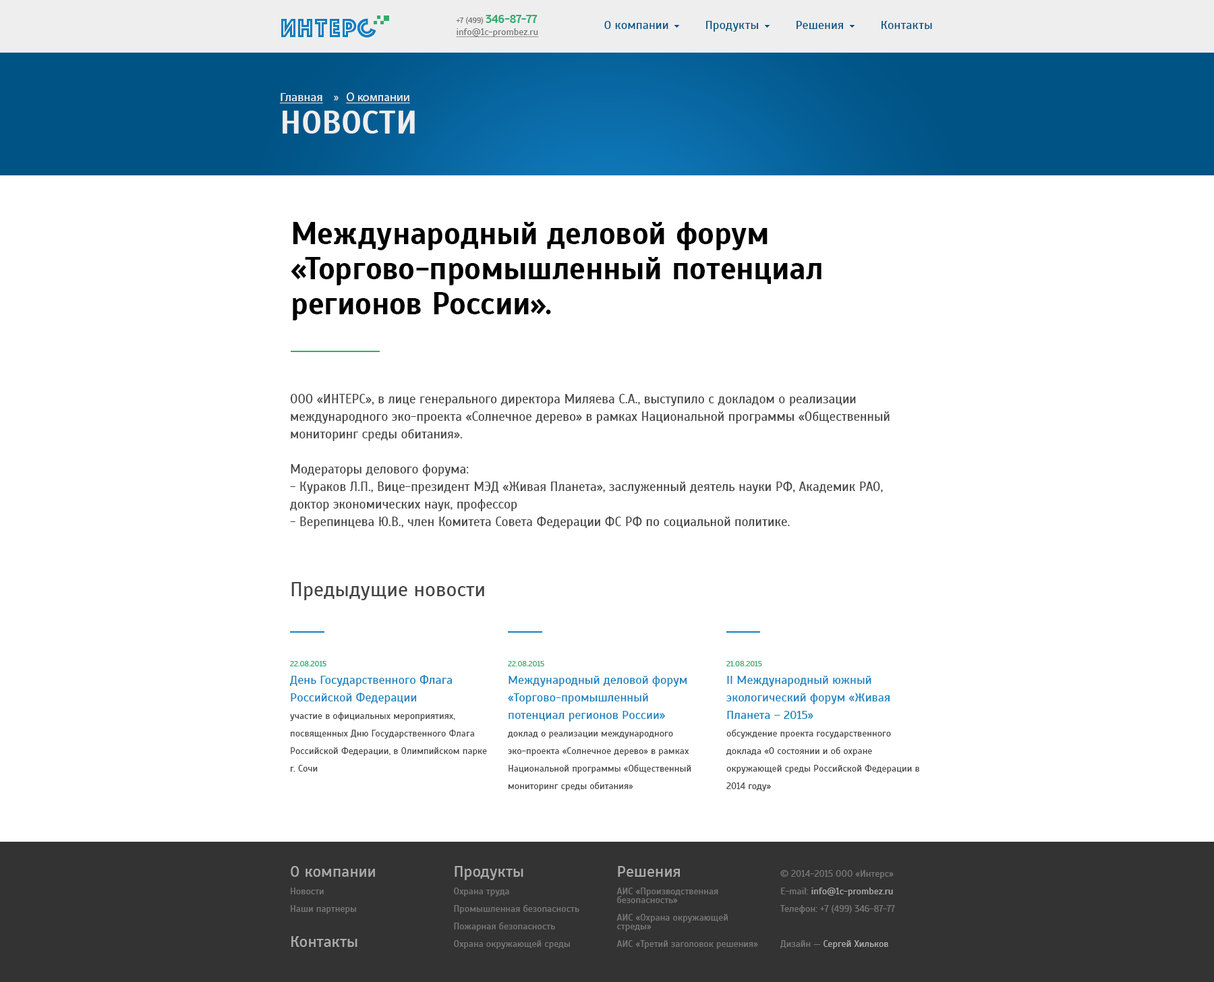
<style>
.page{position:relative;width:1214px;height:982px;background:#ffffff}
.page>*{position:absolute;margin:0}
.t1{font:9.4px/12.1px "Scada";color:#777777;text-decoration:underline}
.t2{font:8.1px/12.1px "Scada";color:#777777}
.t3{font:11.5px/12.1px "Scada-Bold";color:#35ab6c}
.t4{font:12.1px "Scada";color:#005385}
.t5{font:12.1px/32.4px "MyriadPro-Regular";color:#eeeeee;text-decoration:underline}
.t6{font:12.1px/32.4px "Scada";color:#eeeeee;text-decoration:underline}
.t7{font:12.1px/32.4px "MyriadPro-Regular";color:#eeeeee}
.t8{font:32.4px/32.4px "Scada-Bold";color:#eeeeee;text-transform:uppercase}
.t9{font:31px/35.1px "Scada-Bold";color:#000000}
.t10{font:12.8px/17.5px "Scada";color:#444444}
.t11{font:20.2px/17.5px "Scada";color:#444444}
.t12{font:9.4px/17.5px "Scada";color:#444444}
.t13{font:8.1px/17.5px "Scada";color:#17ac71}
.t14{font:12.1px/17.5px "Scada";color:#1581bf}
.t15{font:8.1px/17.5px "Scada";color:#35ab6c}
.t16{font:9.4px/17.5px "Scada";color:#777777}
.t17{font:16.2px/17.5px "Scada";color:#ababab}
.t18{font:9.4px/8.8px "Scada";color:#777777}
.t19{font:9.4px/17.5px "Scada";color:#ababab}
</style>
<div class="page">
<p class="t1" style="left:456px;top:15px;width:83px;height:22px"><span class="t2">+7 (499) </span><span class="t3">346-87-77<br></span>info@1c-prombez.ru</p>
<p class="t4" style="left:604px;top:21px;width:64px;height:8px">О компании</p>
<p class="t4" style="left:706px;top:21px;width:53px;height:11px">Продукты</p>
<p class="t4" style="left:797px;top:21px;width:46px;height:8px">Решения</p>
<p class="t4" style="left:882px;top:21px;width:50px;height:8px">Контакты</p>
<p class="t5" style="left:280px;top:92px;width:135px;height:42px"><span class="t6">Главная   </span><span class="t7">»   </span>О компании<br><span class="t8">Новости</span></p>
<p class="t9" style="left:291px;top:222px;width:531px;height:98px">Международный деловой форум «Торгово-промышленный потенциал регионов России».</p>
<p class="t10" style="left:290px;top:394px;width:600px;height:206px">ООО «ИНТЕРС», в лице генерального директора Миляева С.А., выступило с докладом о реализации международного эко-проекта «Солнечное дерево» в рамках Национальной программы «Общественный мониторинг среды обитания».<br><br>Модераторы делового форума:<br>- Кураков Л.П., Вице-президент МЭД «Живая Планета», заслуженный деятель науки РФ, Академик РАО, доктор экономических наук, профессор<br>- Верепинцева Ю.В., член Комитета Совета Федерации ФС РФ по социальной политике.<br><br><br><span class="t11"><br>Предыдущие новости</span></p>
<p class="t12" style="left:290px;top:661px;width:197px;height:111px"><span class="t13">22.08.2015<br></span><span class="t14">День Государственного Флага Российской Федерации<br></span>участие в официальных мероприятиях, посвященных Дню Государственного Флага Российской Федерации, в Олимпийском парке г. Сочи</p>
<p class="t12" style="left:507px;top:661px;width:184px;height:130px"><span class="t15">22.08.2015<br></span><span class="t14">Международный деловой форум «Торгово-промышленный потенциал регионов России»<br></span>доклад о реализации международного эко-проекта «Солнечное дерево» в рамках Национальной программы «Общественный мониторинг среды обитания»</p>
<p class="t12" style="left:726px;top:661px;width:193px;height:130px"><span class="t15">21.08.2015<br></span><span class="t14">II Международный южный экологический форум «Живая Планета – 2015»<br></span>обсуждение проекта государственного доклада «О состоянии и об охране окружающей среды Российской Федерации в 2014 году»</p>
<p class="t16" style="left:291px;top:866px;width:84px;height:81px"><span class="t17">О компании<br></span>Новости<br>Наши партнеры<br><br><span class="t17">Контакты</span></p>
<p class="t16" style="left:454px;top:866px;width:125px;height:83px"><span class="t17">Продукты<br></span>Охрана труда<br>Промышленная безопасность<br>Пожарная безопасность<br>Охрана окружающей среды</p>
<p class="t18" style="left:617px;top:866px;width:141px;height:83px"><span class="t17">Решения<br></span><span class="t16">АИС «Производственная </span>безопасность»<br><span class="t16">АИС</span> «Охрана окружающей стреды»<br><br>АИС «Третий заголовок решения»</p>
<p class="t16" style="left:780px;top:870px;width:115px;height:79px">© 2014-2015 ООО «Интерс»<br>E-mail: <span class="t19">info@1c-prombez.ru<br></span>Телефон: +7 (499) 346-87-77<br><br>Дизайн — <span class="t19">Сергей Хильков</span></p>
</div>
